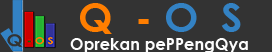
<style>
.page{position:relative;width:272px;height:52px;background:#333333}
.page>*{position:absolute;margin:0}
.t1{font:41.2px "CenturyGothic-Bold";color:#ff7e00}
.t2{font:41.2px "CenturyGothic-Bold";color:#3382c4}
.t3{font:16.3px "CenturyGothic-Bold";color:#fdfdfd}
</style>
<div class="page">
<p class="t1" style="left:80px;top:3px;width:161px;height:31px">Q  - <span class="t2">O  S</span></p>
<p class="t3" style="left:70px;top:38px;width:178px;height:15px">Oprekan pePPengQya</p>
</div>
